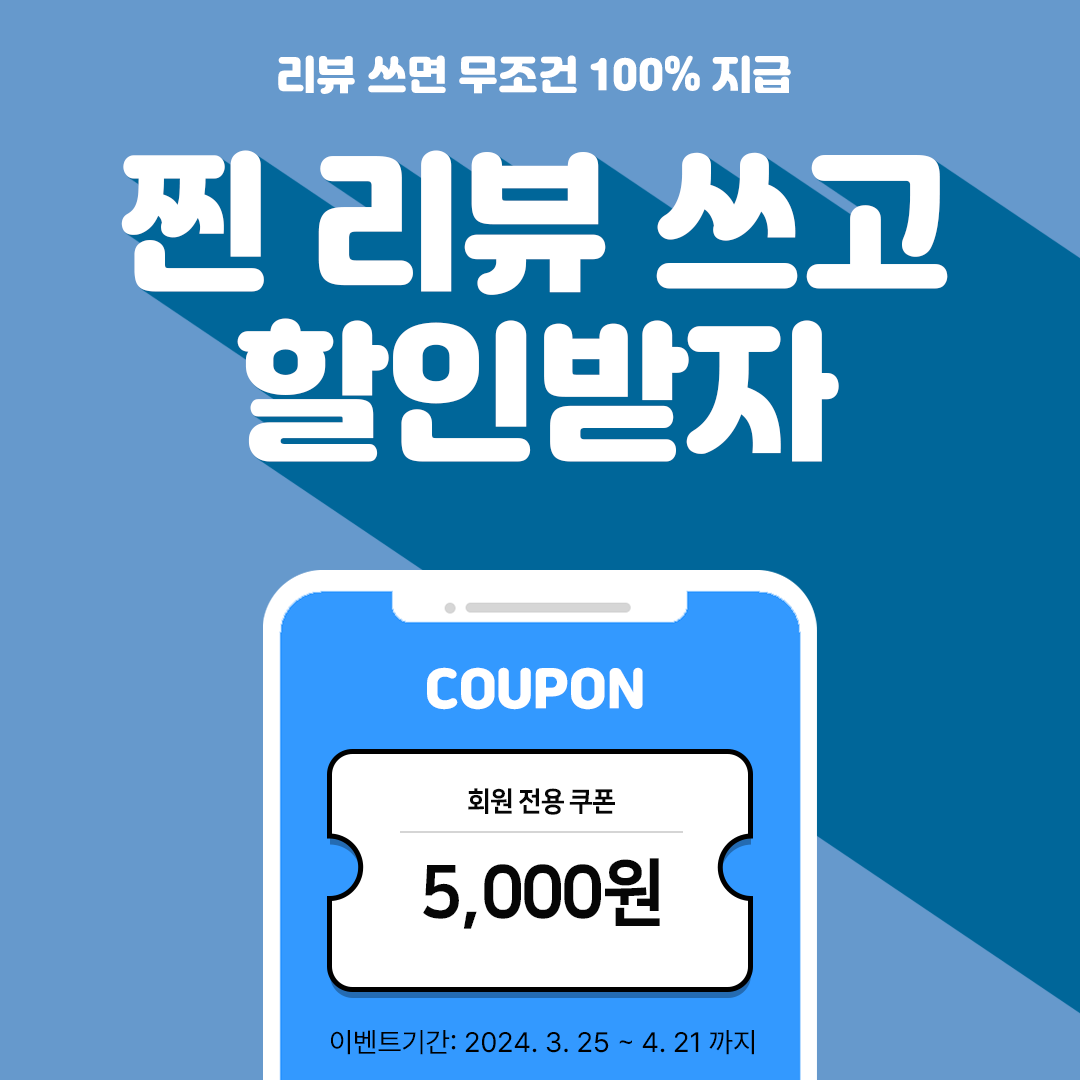
<style>
.page{position:relative;width:1080px;height:1080px;background:#6699cc}
.page>*{position:absolute;margin:0}
.t1{font:40px "Jalnan";color:#ffffff}
.t2{font:150px/170px "Jalnan";color:#ffffff}
.t3{font:50px "Jalnan";color:#ffffff}
.t4{font:28px "PretendardVariable-Regular";color:#000000}
</style>
<div class="page">
<p class="t1" style="left:278px;top:55px;width:513px;height:39px">리뷰 쓰면 무조건 100% 지급</p>
<p class="t2" style="left:121px;top:150px;width:827px;height:312px;text-align:center">찐 리뷰 쓰고<br>할인받자</p>
<p class="t3" style="left:427px;top:667px;width:216px;height:43px">COUPON</p>
<p class="t4" style="left:331px;top:1030px;width:423px;height:25px">이벤트기간: 2024. 3. 25 ~ 4. 21 까지</p>
</div>
